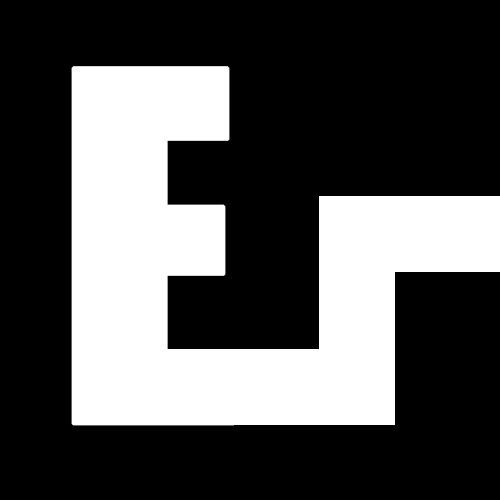
<style>
.page{position:relative;width:500px;height:500px;background:#000000}
.page>*{position:absolute;margin:0}
.t1{font:450px "Impact";letter-spacing:-0.04em;color:#ffffff;font-weight:bold}
</style>
<div class="page">
<p class="t1" style="left:71px;top:66px;width:165px;height:360px">E</p>
</div>
